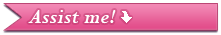
<style>
.page{position:relative;width:221px;height:35px}
.page>*{position:absolute;margin:0}
.t1{font:22px "Perpetua-BoldItalic";letter-spacing:0.01em;color:#ffffff}
</style>
<div class="page">
<p class="t1" style="left:28px;top:10px;width:88px;height:14px">Assist me!</p>
</div>
